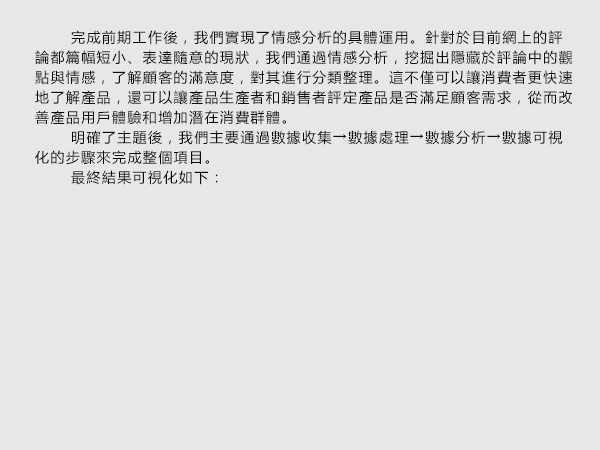
<style>
.page{position:relative;width:600px;height:450px;background:#e6e7e9}
.page>*{position:absolute;margin:0}
.t1{font:14px/20px "MicrosoftYaHei";letter-spacing:0.1em;color:#0a0a0a}
</style>
<div class="page">
<p class="t1" style="left:35px;top:30px;width:538px;height:155px">完成前期工作後，我們實現了情感分析的具體運用。針對於目前網上的評論都篇幅短小、表達隨意的現狀，我們通過情感分析，挖掘出隱藏於評論中的觀點與情感，了解顧客的滿意度，對其進行分類整理。這不僅可以讓消費者更快速地了解產品，還可以讓產品生產者和銷售者評定產品是否滿足顧客需求，從而改善產品用戶體驗和增加潛在消費群體。<br> 明確了主題後，我們主要通過數據收集→數據處理→數據分析→數據可視化的步驟來完成整個項目。<br> 最終結果可視化如下：</p>
</div>
